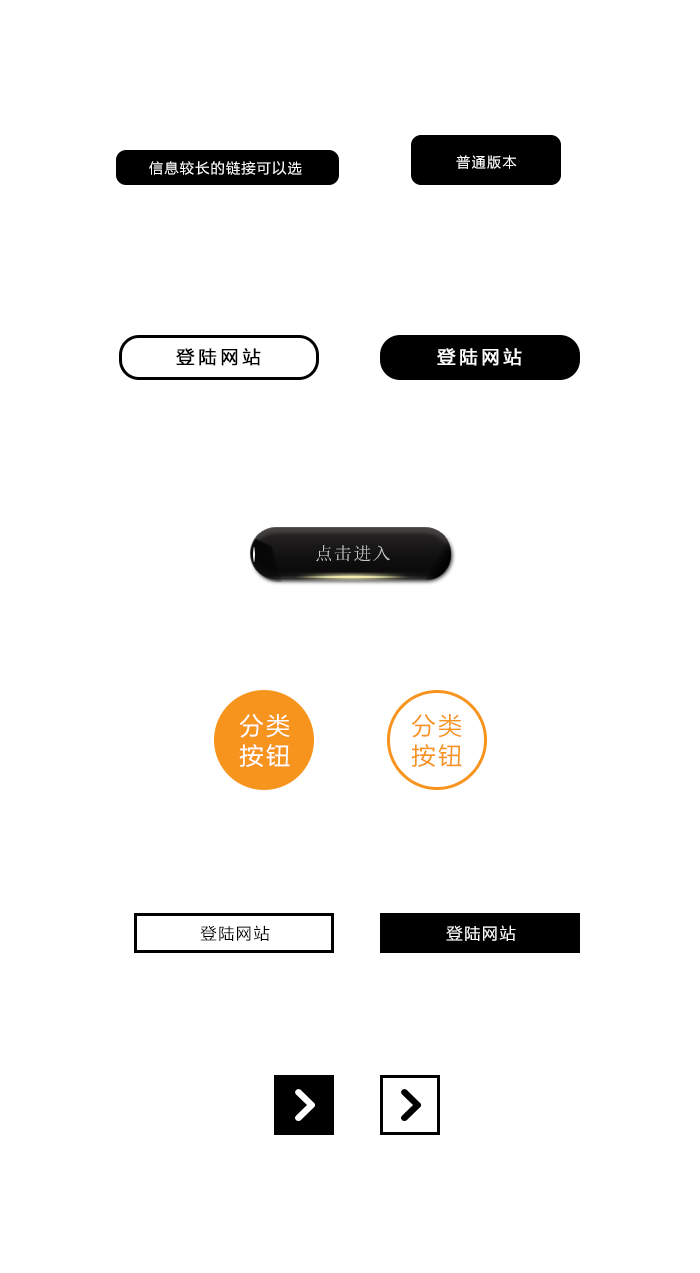
<style>
.page{position:relative;width:700px;height:1273px;background:#ffffff}
.page>*{position:absolute;margin:0}
.t1{font:14px "MicrosoftYaHei";letter-spacing:0.1em;color:#ffffff}
.t2{font:18px "MicrosoftYaHei";letter-spacing:0.2em;color:#000000;font-weight:bold}
.t3{font:18px "MicrosoftYaHei";letter-spacing:0.2em;color:#fffefe;font-weight:bold}
.t4{font:18px "SimSun";letter-spacing:0.1em;color:#c6c6c6}
.t5{font:24px/30px "MicrosoftYaHei";letter-spacing:0.1em;color:#ffffff}
.t6{font:24px/30px "MicrosoftYaHei";letter-spacing:0.1em;color:#f7941e}
.t7{font:16px "MicrosoftYaHei";letter-spacing:0.1em;color:#000000}
.t8{font:16px "MicrosoftYaHei";letter-spacing:0.1em;color:#ffffff}
</style>
<div class="page">
<p class="t1" style="left:149px;top:161px;width:153px;height:14px">信息较长的链接可以选</p>
<p class="t1" style="left:456px;top:155px;width:61px;height:14px">普通版本</p>
<p class="t2" style="left:176px;top:348px;width:85px;height:18px">登陆网站</p>
<p class="t3" style="left:437px;top:348px;width:85px;height:18px">登陆网站</p>
<p class="t4" style="left:316px;top:545px;width:74px;height:17px">点击进入</p>
<p class="t5" style="left:239px;top:714px;width:51px;height:53px;text-align:center">分类<br>按钮</p>
<p class="t6" style="left:411px;top:714px;width:51px;height:53px;text-align:center">分类<br>按钮</p>
<p class="t7" style="left:200px;top:925px;width:70px;height:16px">登陆网站</p>
<p class="t8" style="left:446px;top:925px;width:70px;height:16px">登陆网站</p>
</div>
